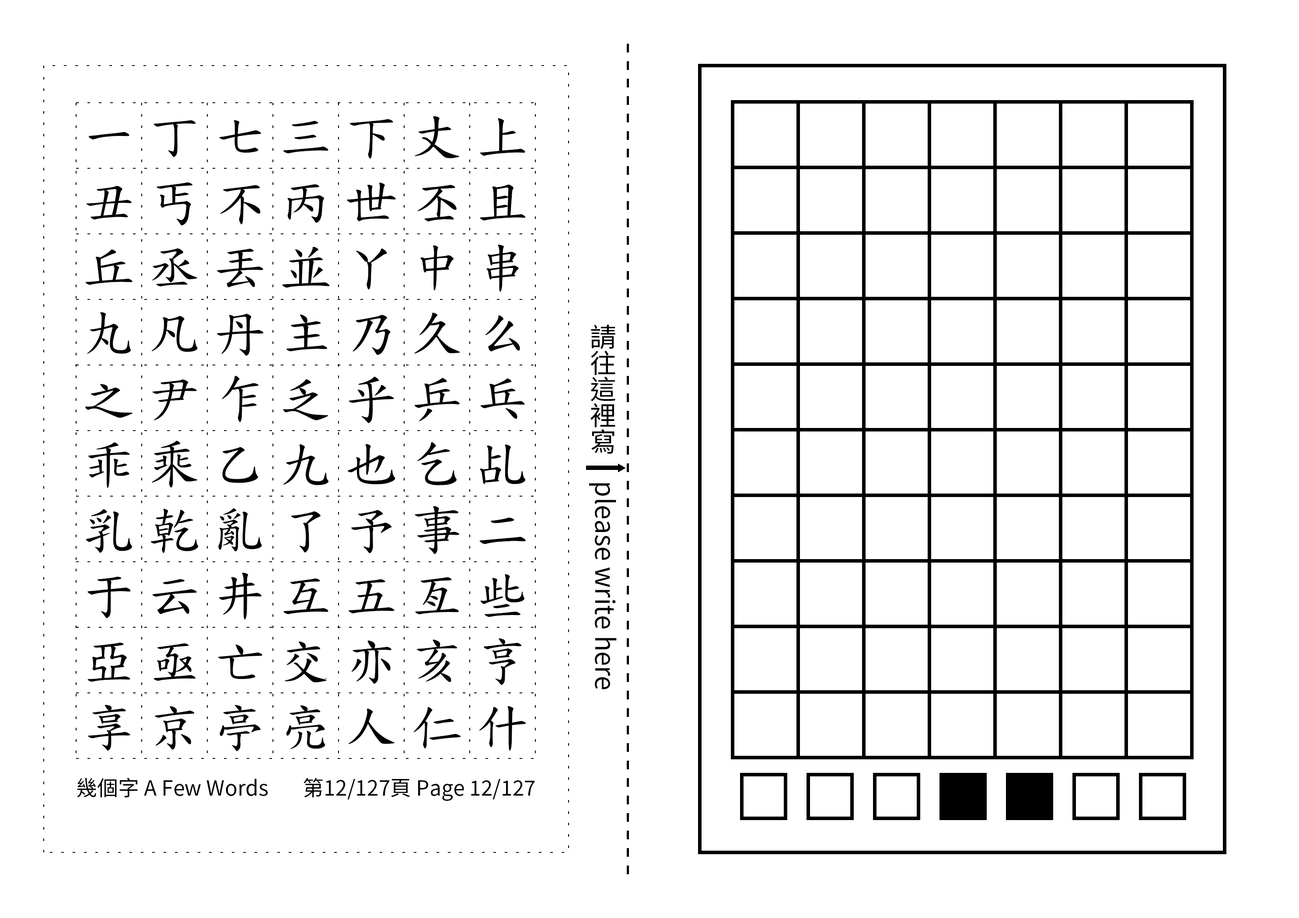
<style>
.page{position:relative;width:1299px;height:918px;background:#ffffff}
.page>*{position:absolute;margin:0}
.t1{font:52.5px/65.6px "TW-Kai-98_1";letter-spacing:0.25em;color:#000000}
.t2{font:26.2px "SourceHanSansTC-Regular";color:#000000}
.t3{font:21px "SourceHanSansTC-Regular";color:#000000}
</style>
<div class="page">
<p class="t1" style="left:85px;top:116px;width:441px;height:636px;text-align:center">一丁七三下丈上丑丐不丙世丕且丘丞丟並丫中串丸凡丹主乃久么之尹乍乏乎乒乓乖乘乙九也乞乩乳乾亂了予事二于云井互五亙些亞亟亡交亦亥亨享京亭亮人仁什</p>
<p class="t2" style="left:589px;top:324px;width:28px;height:366px;text-align:center">請往這裡寫　please write here</p>
<p class="t3" style="left:77px;top:778px;width:191px;height:20px">幾個字 A Few Words</p>
<p class="t3" style="left:303px;top:778px;width:232px;height:23px">第12/127頁 Page 12/127</p>
</div>
